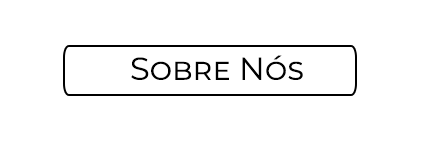
<style>
.page{position:relative;width:426px;height:141px;background:#ffffff}
.page>*{position:absolute;margin:0}
.t1{font:31.5px "Montserrat-Regular";color:#000000;font-variant:small-caps}
</style>
<div class="page">
<p class="t1" style="left:131px;top:55px;width:172px;height:25px">Sobre Nós</p>
</div>
